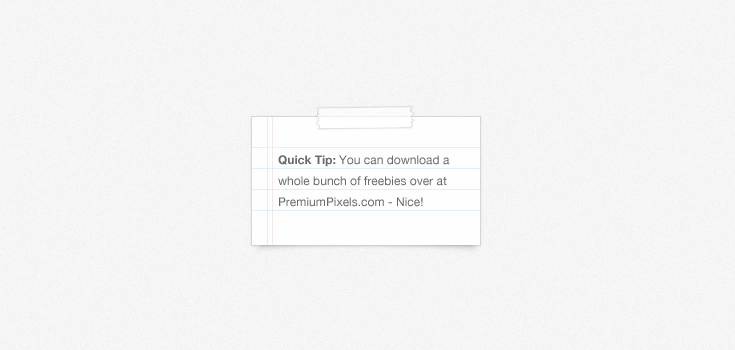
<style>
.page{position:relative;width:735px;height:350px}
.page>*{position:absolute;margin:0}
.t1{font:12px/21px "HelveticaNeue";color:#686a6b}
.t2{font:12px/21px "HelveticaNeue-Bold";color:#686a6b}
</style>
<div class="page">
<p class="t1" style="left:278px;top:155px;width:172px;height:52px"><span class="t2">Quick Tip:</span> You can download a whole bunch of freebies over at PremiumPixels.com - Nice!</p>
</div>
